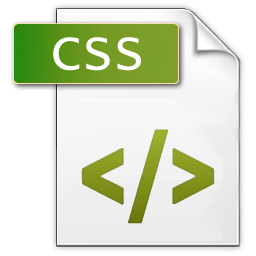
<style>
.page{position:relative;width:256px;height:256px;background:#ffffff}
.page>*{position:absolute;margin:0}
.t1{font:50px "LucidaConsole";letter-spacing:0.025em;color:#ffffff}
</style>
<div class="page">
<p class="t1" style="left:53px;top:37px;width:88px;height:34px">CSS</p>
</div>
